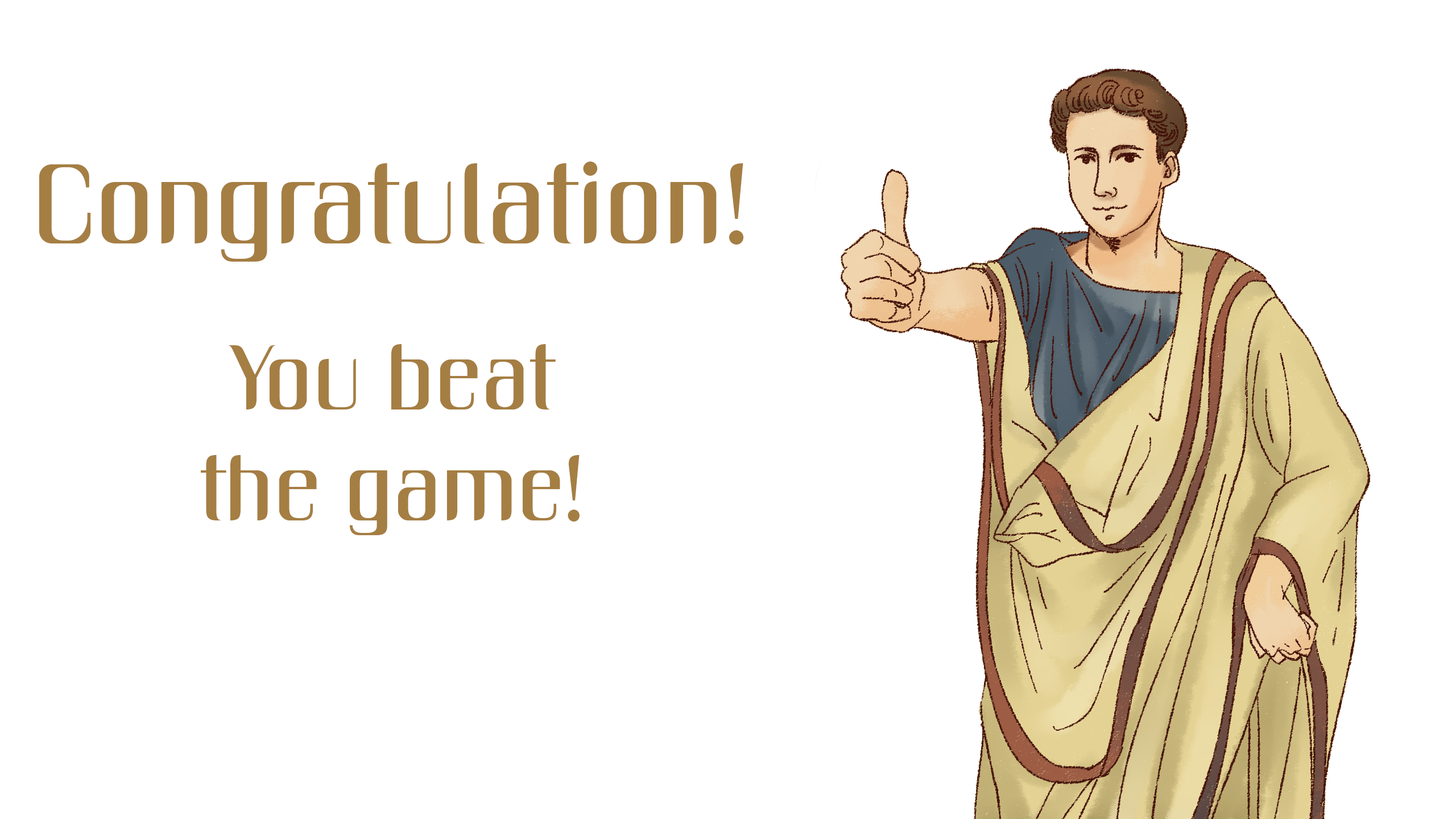
<style>
.page{position:relative;width:1456px;height:819px;background:#ffffff}
.page>*{position:absolute;margin:0}
.t1{font:113.7px "Unique";color:#a57e43}
.t2{font:92.5px "Unique";color:#a57e43}
</style>
<div class="page">
<p class="t1" style="left:39px;top:162px;width:705px;height:100px">Congratulation!</p>
<p class="t2" style="left:201px;top:344px;width:379px;height:191px;text-align:center">You beat<br>the game!</p>
</div>
